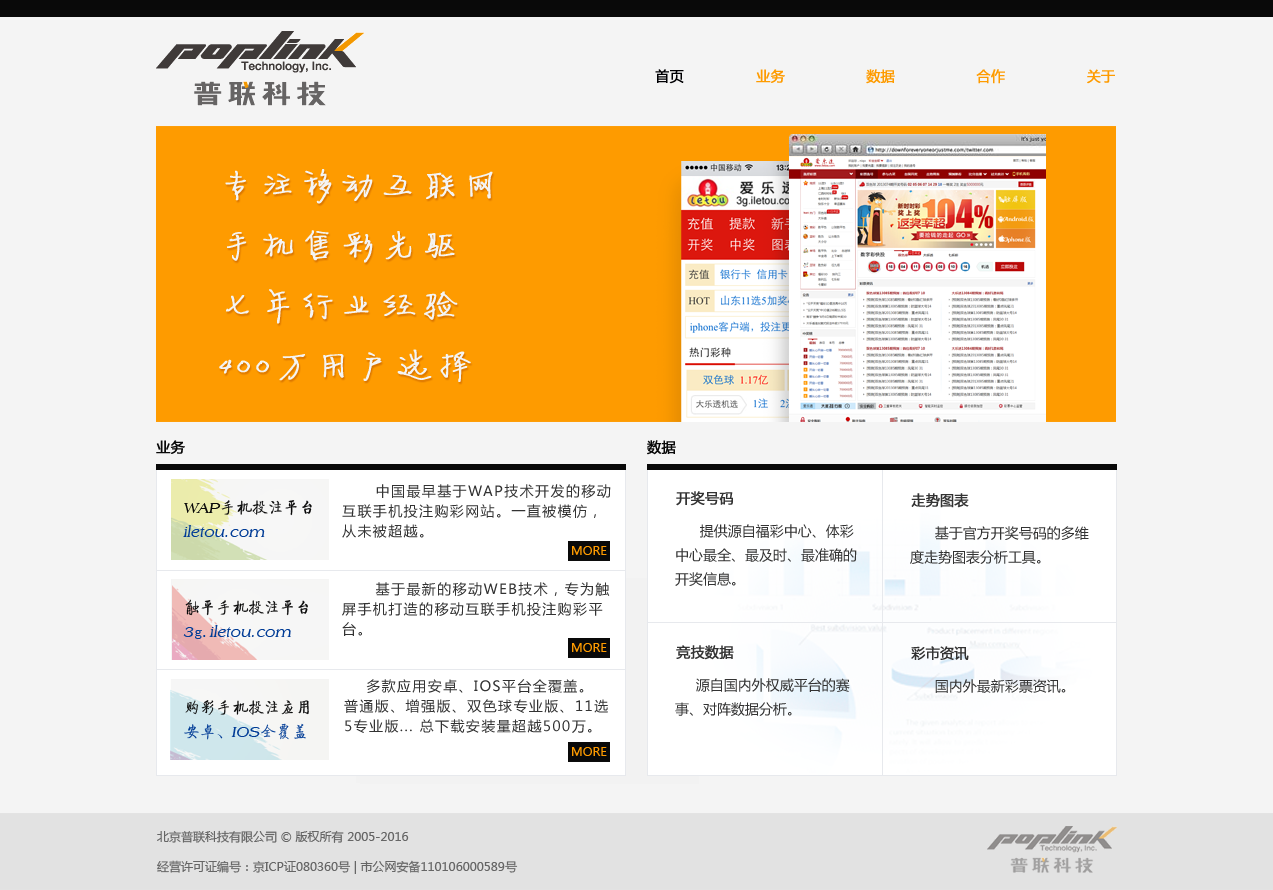
<style>
.page{position:relative;width:1273px;height:890px;background:#f4f4f4}
.page>*{position:absolute;margin:0}
.t1{font:14px "MicrosoftYaHei";color:#fe9b00;text-transform:uppercase;font-weight:bold}
.t2{font:14px "MicrosoftYaHei";color:#000003;text-transform:uppercase;font-weight:bold}
.t3{font:36px/60px "FZJLJW--GB1-0";letter-spacing:0.1em;color:#f4f4f4;font-weight:bold}
.t4{font:14px "MicrosoftYaHei";color:#090909;font-weight:bold}
.t5{font:14px/20px "MicrosoftYaHei";letter-spacing:0.1em;color:#333333}
.t6{font:14px/20px "SimSun";letter-spacing:0.1em;color:#333333}
.t7{font:14px "MicrosoftYaHei";color:#333333;text-transform:uppercase;font-weight:bold}
.t8{font:16px/24px "374-CAI978";color:#013c96}
.t9{font:16px/24px "374-CAI978";color:#090909}
.t10{font:16px/24px "FZQTJW--GB1-0";color:#090909}
.t11{font:14px/24px "MicrosoftYaHei";color:#333333}
.t12{font:12px "MicrosoftYaHei";color:#fe9b00;text-transform:uppercase}
.t13{font:16px/24px "SimSun";color:#013c96}
.t14{font:14px "MicrosoftYaHei";color:#333333}
.t15{font:16px/24px "FZQTJW--GB1-0";color:#013c96}
.t16{font:12px/30px "MicrosoftYaHei";color:#666666}
</style>
<div class="page">
<p class="t1" style="left:655px;top:69px;width:460px;height:15px"><span class="t2">首页                </span>业务                  数据                  合作                  关于</p>
<p class="t3" style="left:219px;top:169px;width:274px;height:213px">专注移动互联网<br>手机售彩先驱<br>七年行业经验<br>400万用户选择</p>
<p class="t4" style="left:156px;top:440px;width:29px;height:14px">业务</p>
<p class="t4" style="left:647px;top:440px;width:29px;height:15px">数据</p>
<p class="t5" style="left:342px;top:484px;width:269px;height:54px"><span class="t6">    </span>中国最早基于WAP技术开发的移动<br>互联手机投注购彩网站。一直被模仿，<br>从未被超越。</p>
<p class="t7" style="left:676px;top:491px;width:57px;height:15px">开奖号码</p>
<p class="t7" style="left:911px;top:493px;width:58px;height:15px">走势图表</p>
<p class="t8" style="left:183px;top:500px;width:129px;height:37px"><span class="t9">WAP</span><span class="t10">手机投注平台<br></span>iletou.com</p>
<p class="t11" style="left:675px;top:524px;width:182px;height:62px">提供源自福彩中心、体彩<br>中心最全、最及时、最准确的<br>开奖信息。</p>
<p class="t11" style="left:910px;top:526px;width:179px;height:38px">基于官方开奖号码的多维<br>度走势图表分析工具。</p>
<p class="t12" style="left:572px;top:546px;width:35px;height:9px">more</p>
<p class="t5" style="left:342px;top:582px;width:268px;height:54px"><span class="t6">    </span>基于最新的移动WEB技术，专为触<br>屏手机打造的移动互联手机投注购彩平<br>台。</p>
<p class="t8" style="left:183px;top:599px;width:125px;height:40px"><span class="t10">触平手机投注平台<br></span>3<span class="t13">g.</span>iletou.com</p>
<p class="t12" style="left:572px;top:643px;width:35px;height:9px">more</p>
<p class="t7" style="left:676px;top:645px;width:58px;height:15px">竞技数据</p>
<p class="t7" style="left:911px;top:646px;width:58px;height:14px">彩市资讯</p>
<p class="t11" style="left:675px;top:678px;width:175px;height:38px">源自国内外权威平台的赛<br>事、对阵数据分析。</p>
<p class="t5" style="left:344px;top:679px;width:264px;height:54px">多款应用安卓、IOS平台全覆盖。<br>普通版、增强版、双色球专业版、11选<br>5专业版... 总下载安装量超越500万。</p>
<p class="t14" style="left:935px;top:679px;width:131px;height:14px">国内外最新彩票资讯。</p>
<p class="t10" style="left:184px;top:700px;width:125px;height:40px">购彩手机投注应用<br><span class="t15">安卓、</span><span class="t8">IOS</span><span class="t15">全覆盖</span></p>
<p class="t12" style="left:572px;top:747px;width:35px;height:9px">more</p>
<p class="t16" style="left:157px;top:830px;width:361px;height:44px">北京普联科技有限公司 © 版权所有 2005-2016<br>经营许可证编号：京ICP证080360号 | 市公网安备110106000589号</p>
</div>
